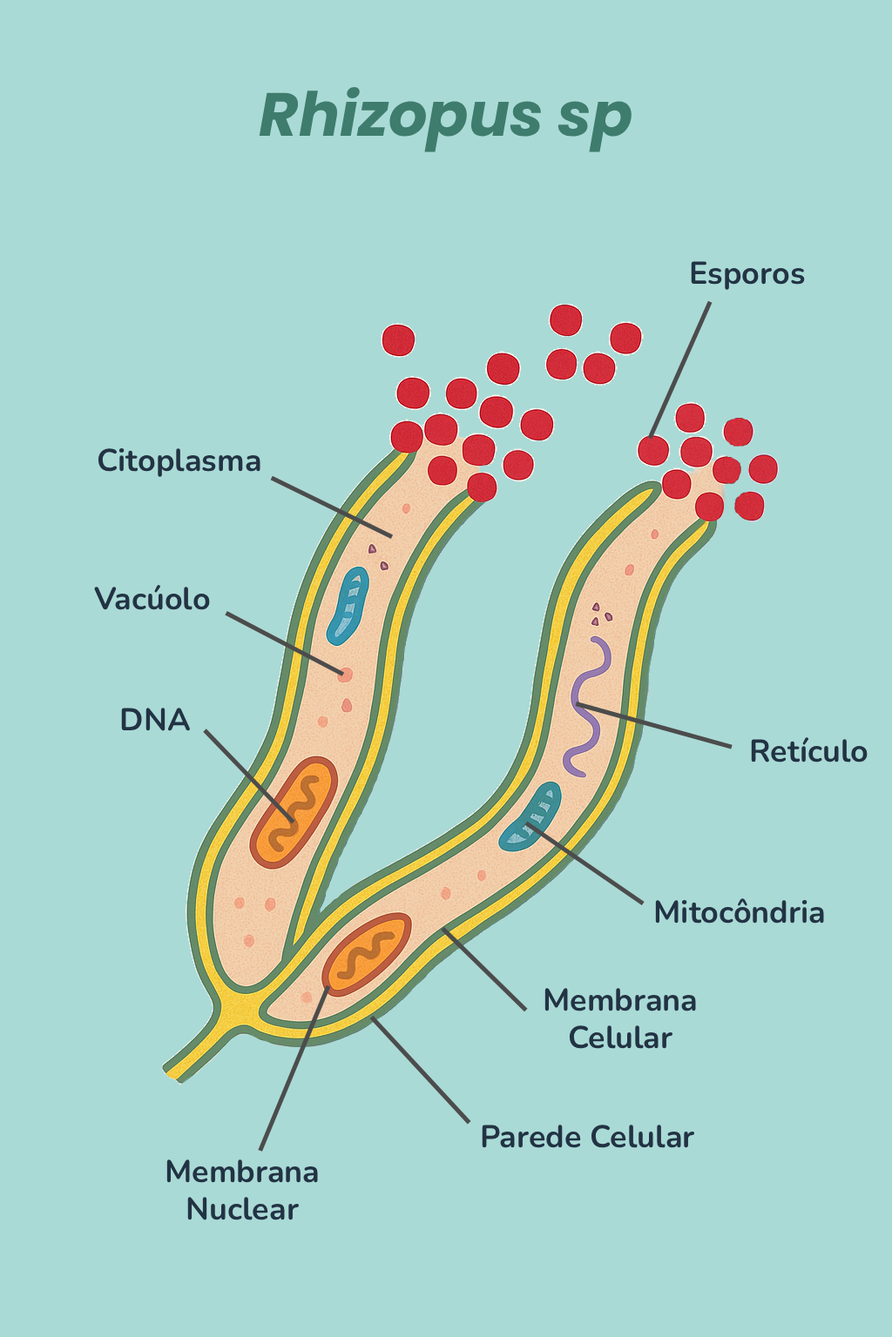
<style>
.page{position:relative;width:892px;height:1337px;background:#aadad6}
.page>*{position:absolute;margin:0}
.t1{font:60.9px "Poppins-BoldItalic";color:#3e7c6d}
.t2{font:31.3px "Nunito-Bold";color:#223344}
</style>
<div class="page">
<p class="t1" style="left:259px;top:86px;width:374px;height:66px">Rhizopus sp</p>
<p class="t2" style="left:690px;top:261px;width:115px;height:29px">Esporos</p>
<p class="t2" style="left:98px;top:448px;width:162px;height:29px">Citoplasma</p>
<p class="t2" style="left:94px;top:584px;width:116px;height:26px">Vacúolo</p>
<p class="t2" style="left:121px;top:708px;width:70px;height:23px">DNA</p>
<p class="t2" style="left:751px;top:737px;width:116px;height:26px">Retículo</p>
<p class="t2" style="left:655px;top:899px;width:169px;height:25px">Mitocôndria</p>
<p class="t2" style="left:544px;top:988px;width:152px;height:61px;text-align:center">Membrana Celular</p>
<p class="t2" style="left:482px;top:1125px;width:213px;height:23px">Parede Celular</p>
<p class="t2" style="left:166px;top:1160px;width:152px;height:61px;text-align:center">Membrana Nuclear</p>
</div>
